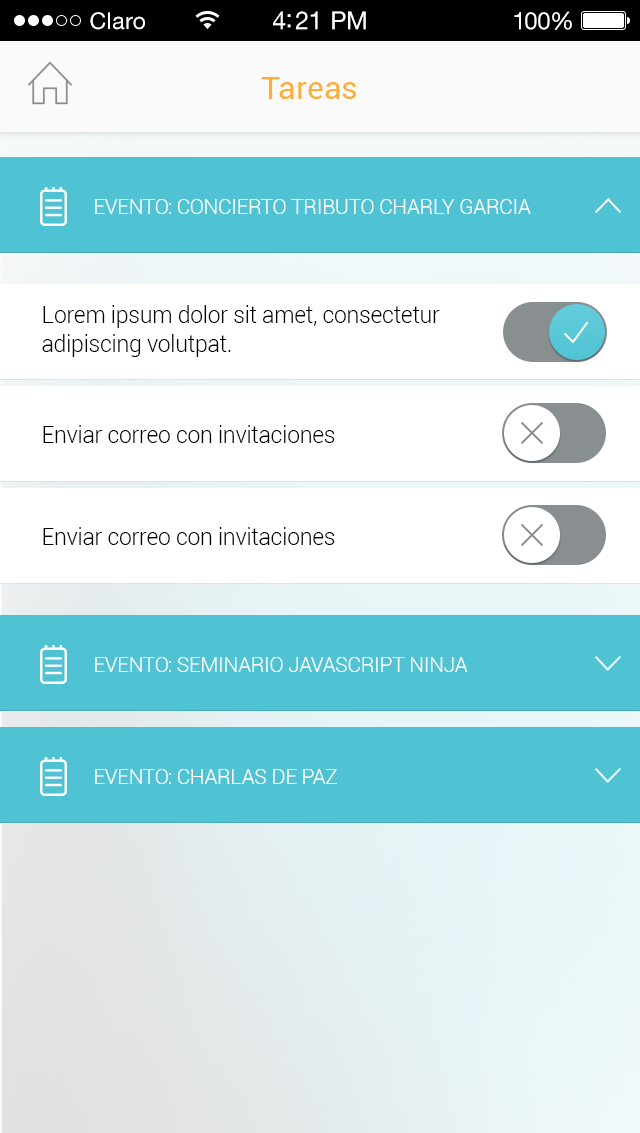
<style>
.page{position:relative;width:640px;height:1133px;background:#4fc3d4}
.page>*{position:absolute;margin:0}
.t1{font:23px "HelveticaNeueLTStd-Roman";letter-spacing:0.02em;color:#ffffff}
.t2{font:25px "HelveticaNeueLTStd-Roman";letter-spacing:-0.02em;color:#ffffff}
.t3{font:24px "HelveticaNeueLTStd-Roman";letter-spacing:-0.02em;color:#ffffff}
.t4{font:32px "Roboto-Regular";color:#faaf3a}
.t5{font:20.8px "Roboto-Light";letter-spacing:-0.01em;color:#ffffff}
.t6{font:22.9px/29.2px "Roboto-Light";letter-spacing:-0.01em;color:#000000}
.t7{font:22.9px "Roboto-Light";letter-spacing:-0.01em;color:#000000}
</style>
<div class="page">
<p class="t1" style="left:90px;top:12px;width:55px;height:18px">Claro</p>
<p class="t2" style="left:273px;top:11px;width:93px;height:19px">4:21 PM</p>
<p class="t3" style="left:514px;top:11px;width:58px;height:19px">100%</p>
<p class="t4" style="left:261px;top:77px;width:96px;height:22px">Tareas</p>
<p class="t5" style="left:95px;top:199px;width:436px;height:15px">EVENTO: CONCIERTO TRIBUTO CHARLY GARCIA</p>
<p class="t6" style="left:42px;top:305px;width:398px;height:52px">Lorem ipsum dolor sit amet, consectetur <br>adipiscing volutpat.</p>
<p class="t7" style="left:43px;top:425px;width:292px;height:18px">Enviar correo con invitaciones</p>
<p class="t7" style="left:43px;top:527px;width:292px;height:18px">Enviar correo con invitaciones</p>
<p class="t5" style="left:95px;top:657px;width:373px;height:15px">EVENTO: SEMINARIO JAVASCRIPT NINJA</p>
<p class="t5" style="left:95px;top:769px;width:242px;height:15px">EVENTO: CHARLAS DE PAZ</p>
</div>
